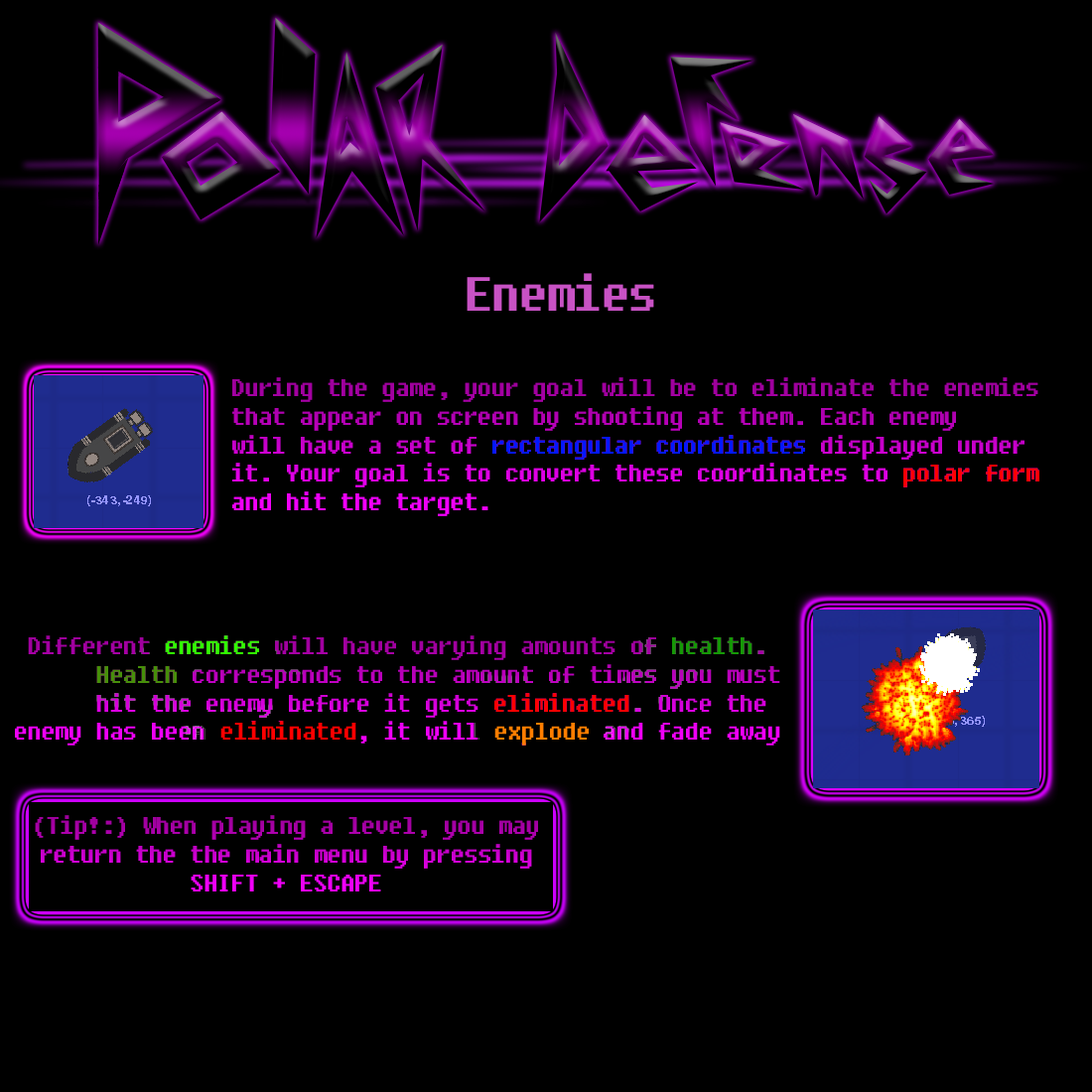
<style>
.page{position:relative;width:1092px;height:1092px;background:#000000}
.page>*{position:absolute;margin:0}
.t1{font:47.7px "Fixedsys";letter-spacing:-0.05em;color:#c852c4}
.t2{font:23.8px "Fixedsys";letter-spacing:-0.05em}
</style>
<div class="page">
<p class="t1" style="left:467px;top:273px;width:187px;height:38px">Enemies</p>
<p class="t2" style="left:232px;top:377px;width:807px;height:139px">During the game, your goal will be to eliminate the enemies <br>that appear on screen by shooting at them. Each enemy<br>will have a set of rectangular coordinates displayed under <br>it. Your goal is to convert these coordinates to polar form <br>and hit the target.</p>
<p class="t2" style="left:35px;top:815px;width:503px;height:76px;text-align:center">(Tip!:) When playing a level, you may<br>return the the main menu by pressing<br>SHIFT + ESCAPE</p>
</div>
